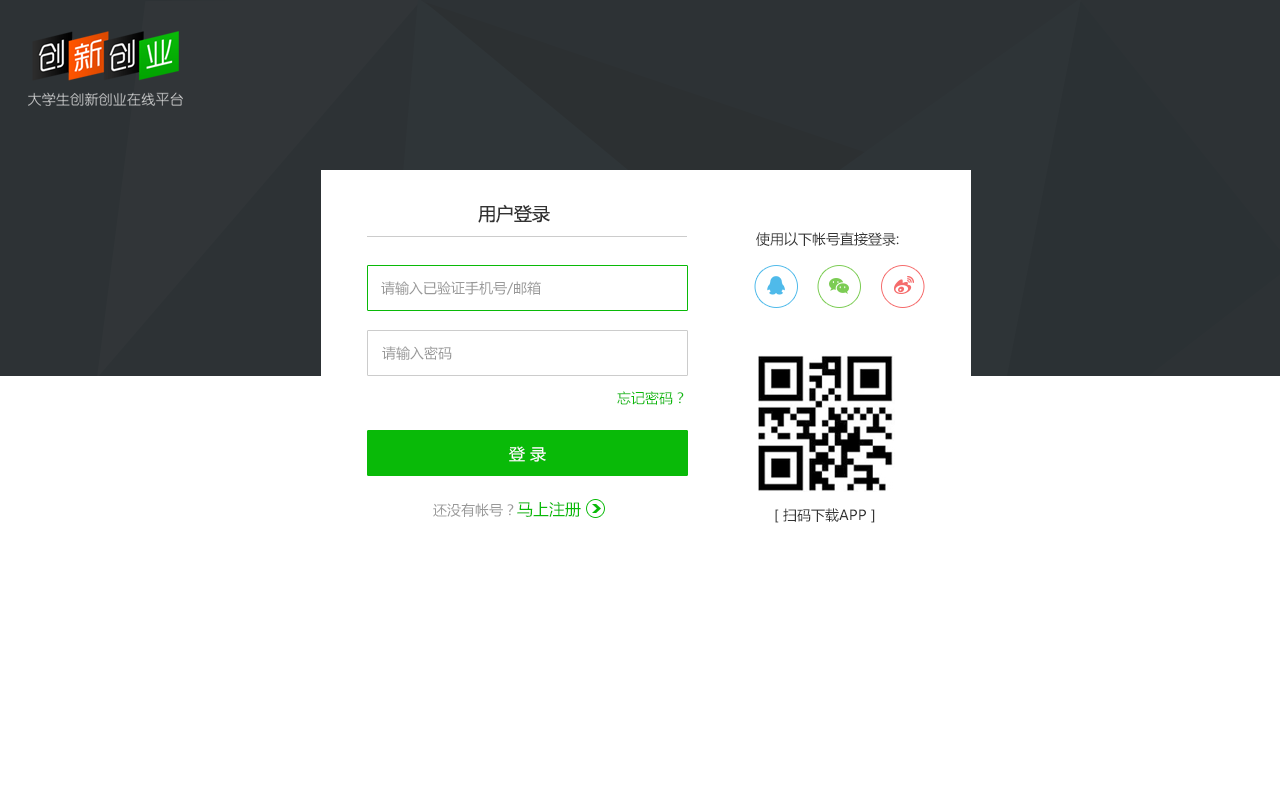
<style>
.page{position:relative;width:1280px;height:800px;background:#ffffff}
.page>*{position:absolute;margin:0}
.t1{font:18px "MicrosoftYaHei";color:#333333}
.t2{font:14px "MicrosoftYaHei";color:#333333}
.t3{font:14px "MicrosoftYaHei";color:#999999}
.t4{font:14px "MicrosoftYaHei";color:#09ba08}
.t5{font:16px "MicrosoftYaHei";color:#ffffff}
.t6{font:16px "MicrosoftYaHei";color:#09ba08}
</style>
<div class="page">
<p class="t1" style="left:478px;top:204px;width:72px;height:19px">用户登录</p>
<p class="t2" style="left:756px;top:232px;width:143px;height:14px">使用以下帐号直接登录:</p>
<p class="t3" style="left:381px;top:281px;width:160px;height:14px">请输入已验证手机号/邮箱</p>
<p class="t3" style="left:382px;top:346px;width:70px;height:14px">请输入密码</p>
<p class="t4" style="left:617px;top:391px;width:67px;height:14px">忘记密码？</p>
<p class="t5" style="left:509px;top:446px;width:37px;height:16px">登 录</p>
<p class="t3" style="left:433px;top:501px;width:148px;height:16px">还没有帐号？<span class="t6">马上注册</span></p>
<p class="t2" style="left:775px;top:508px;width:100px;height:15px">[ 扫码下载APP ]</p>
</div>
